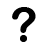
<style>
.page{position:relative;width:48px;height:48px;background:#ffffff}
.page>*{position:absolute;margin:0}
.t1{font:48px "ArialRoundedMTBold";color:#000000}
</style>
<div class="page">
<p class="t1" style="left:12px;top:7px;width:24px;height:35px">?</p>
</div>
